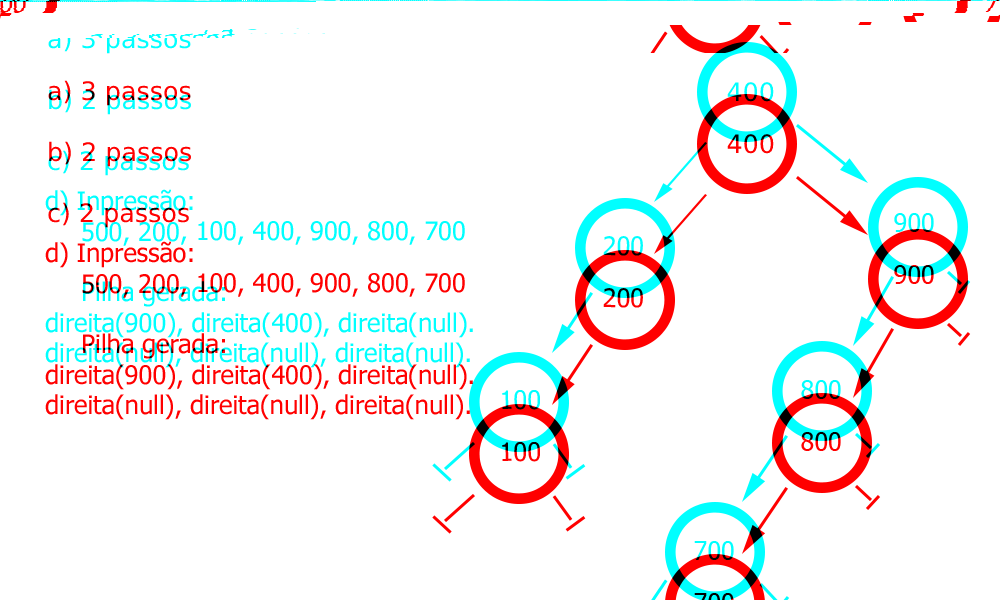
<style>
.page{position:relative;width:1000px;height:600px;background:#ffffff}
.page>*{position:absolute;margin:0}
.t1{font:25.4px "Tahoma"}
</style>
<div class="page">
<p class="t1" style="left:48px;top:27px;width:144px;height:148px">a) 3 passos<br><br>b) 2 passos<br><br>c) 2 passos</p>
<p class="t1" style="left:727px;top:81px;width:47px;height:20px">400</p>
<p class="t1" style="left:45px;top:188px;width:428px;height:179px">d) Inpressão:<br> 500, 200, 100, 400, 900, 800, 700<br><br> Pilha gerada:<br>direita(900), direita(400), direita(null).<br>direita(null), direita(null), direita(null).</p>
<p class="t1" style="left:894px;top:212px;width:40px;height:19px">900</p>
<p class="t1" style="left:603px;top:235px;width:40px;height:20px;rotate:1deg">200</p>
<p class="t1" style="left:502px;top:389px;width:38px;height:20px;rotate:-1deg">100</p>
<p class="t1" style="left:801px;top:379px;width:40px;height:19px">800</p>
<p class="t1" style="left:694px;top:540px;width:40px;height:19px">700</p>
</div>
